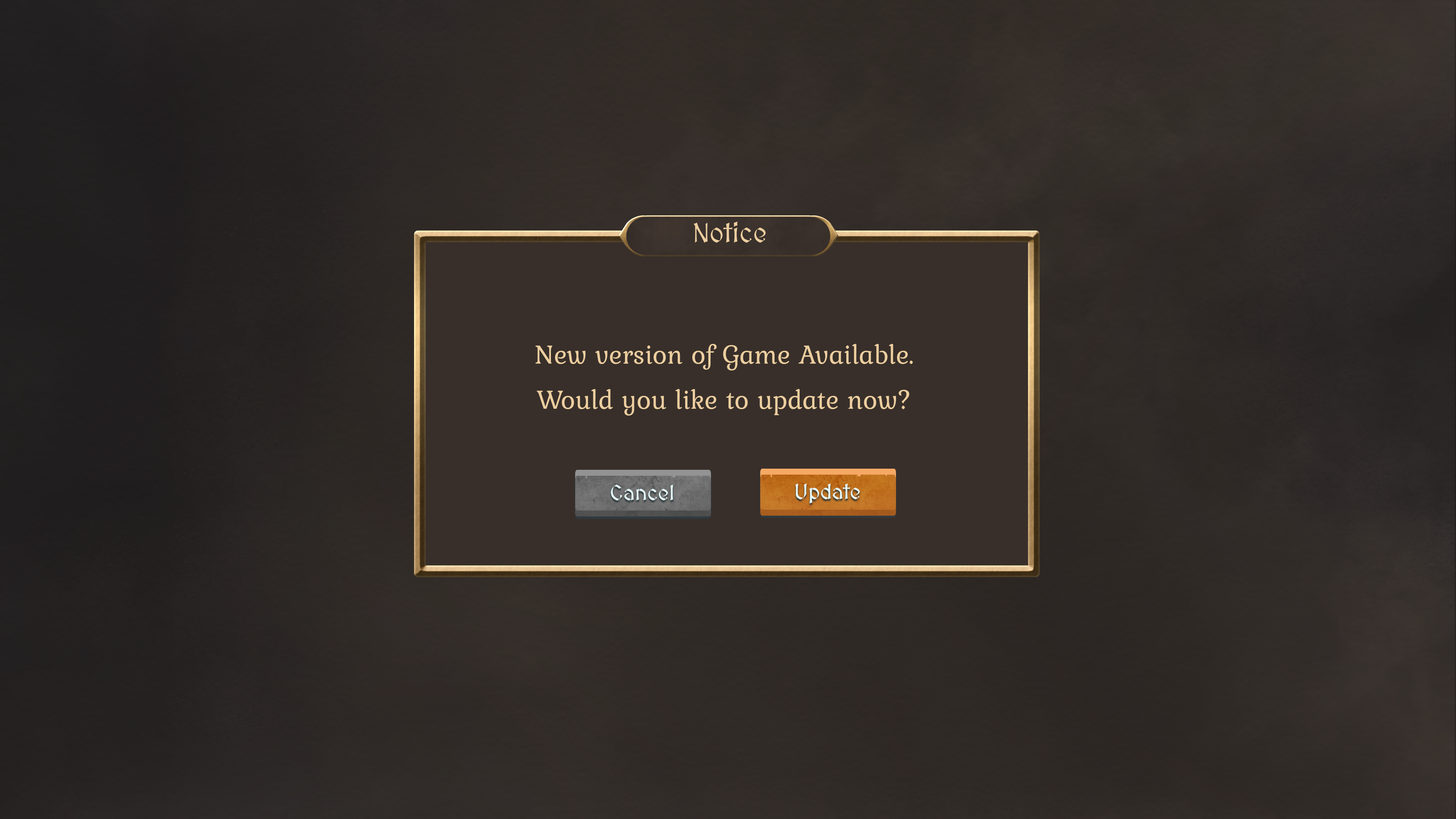
<style>
.page{position:relative;width:1456px;height:819px}
.page>*{position:absolute;margin:0}
.t1{font:27.3px "MedievalSharp";color:#ecce9f}
.t2{font:27.3px "Kurale-Regular";color:#ecce9f}
.t3{font:21.4px "MedievalSharp";color:#e5fbfd}
</style>
<div class="page">
<p class="t1" style="left:693px;top:221px;width:73px;height:22px">Notice</p>
<p class="t2" style="left:535px;top:344px;width:378px;height:26px">New version of Game Available.</p>
<p class="t2" style="left:537px;top:389px;width:372px;height:27px">Would you like to update now?</p>
<p class="t3" style="left:611px;top:485px;width:62px;height:15px">Cancel</p>
<p class="t3" style="left:795px;top:483px;width:65px;height:21px">Update</p>
</div>
